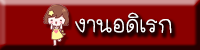
<style>
.page{position:relative;width:200px;height:50px;background:#8a0000}
.page>*{position:absolute;margin:0}
.t1{font:36px "THMaliGrade6-Bold";color:#fefefe}
</style>
<div class="page">
<p class="t1" style="left:75px;top:12px;width:97px;height:22px">งานอดิเรก</p>
</div>
